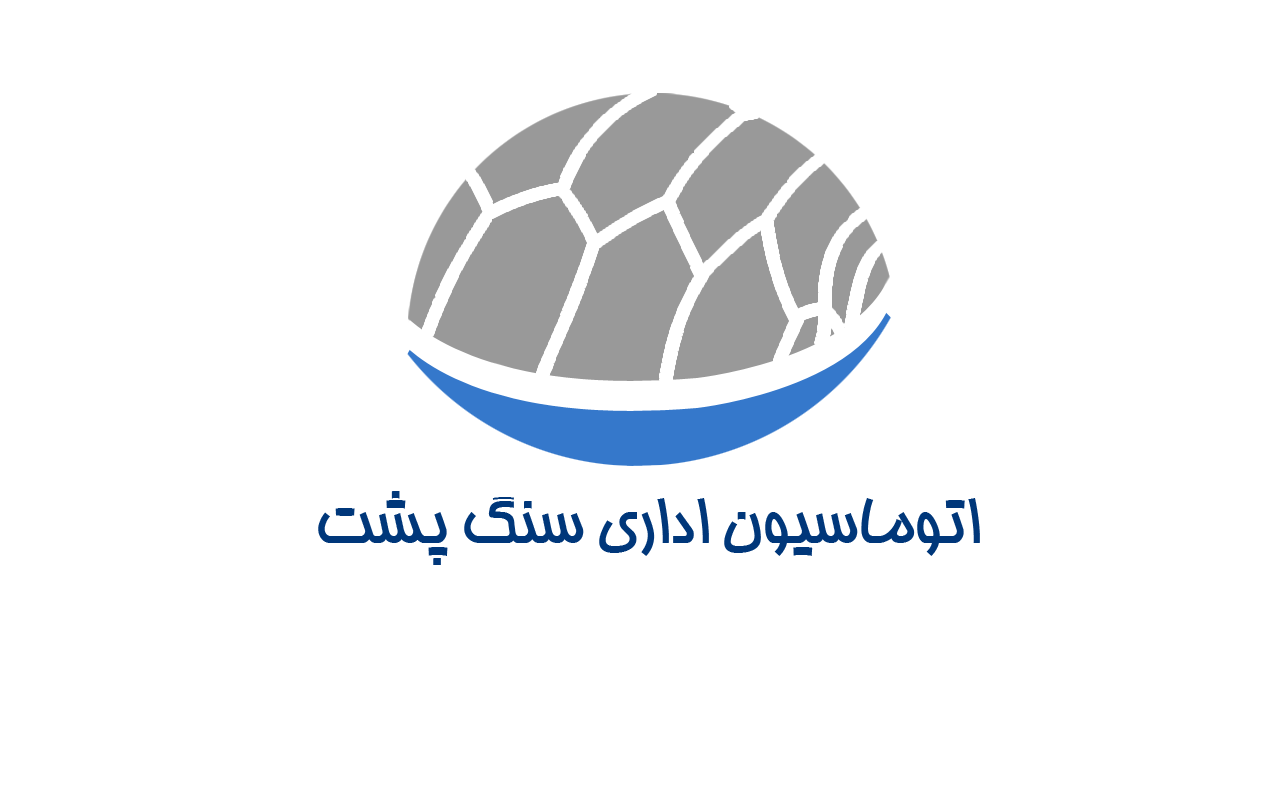
<style>
.page{position:relative;width:1280px;height:800px;background:#ffffff}
.page>*{position:absolute;margin:0}
.t1{font:71px "BHoma";letter-spacing:-0.02em;color:#00377a}
</style>
<div class="page">
<p class="t1" style="left:318px;top:491px;width:662px;height:74px">اتوماسیون اداری سنگ پشت</p>
</div>
